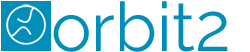
<style>
.page{position:relative;width:250px;height:52px;background:#ffffff}
.page>*{position:absolute;margin:0}
.t1{font:68px "Raleway-Regular";color:#018ebb}
</style>
<div class="page">
<p class="t1" style="left:53px;top:1px;width:175px;height:51px">orbit2</p>
</div>
